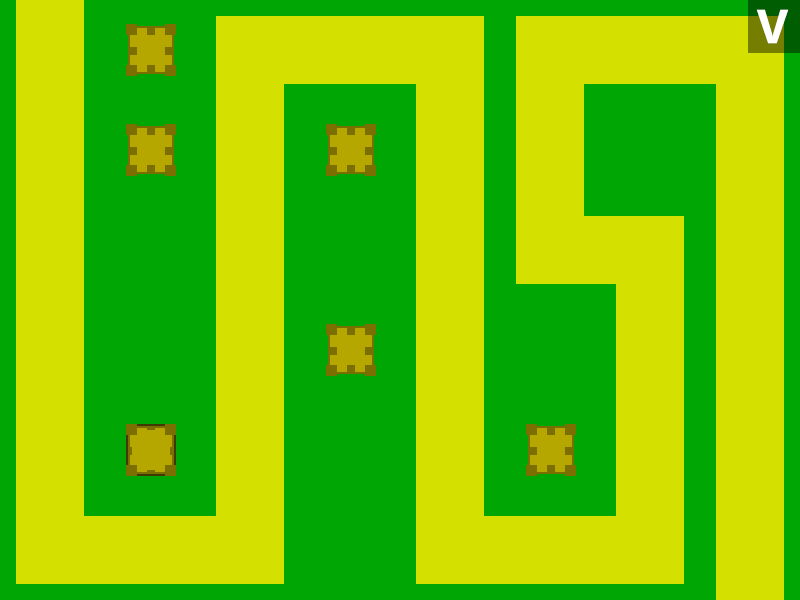
<style>
.page{position:relative;width:800px;height:600px;background:#d3e000}
.page>*{position:absolute;margin:0}
.t1{font:48px "SegoeUI-Bold";color:#ffffff}
</style>
<div class="page">
<p class="t1" style="left:756px;top:9px;width:33px;height:35px">V</p>
</div>
